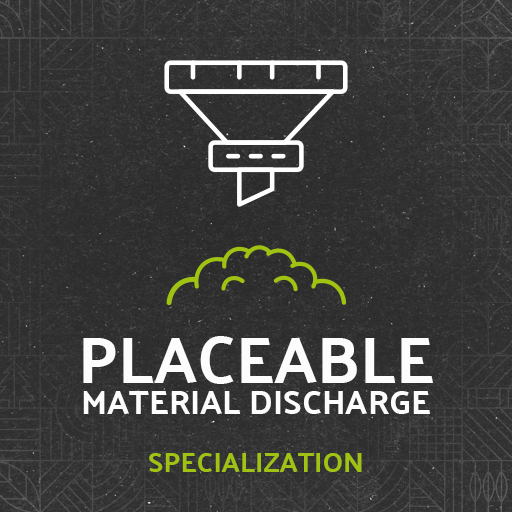
<style>
.page{position:relative;width:512px;height:512px}
.page>*{position:absolute;margin:0}
.t1{font:66px "PalanquinDark-Regular";color:#fcfcfc;text-transform:uppercase}
.t2{font:34px "PalanquinDark-Regular";color:#fcfcfc;text-transform:uppercase}
.t3{font:28px "PalanquinDark-Regular";color:#a0c213;text-transform:uppercase}
</style>
<div class="page">
<p class="t1" style="left:83px;top:336px;width:350px;height:48px">Placeable</p>
<p class="t2" style="left:83px;top:391px;width:347px;height:23px">Material DISCHARGE</p>
<p class="t3" style="left:149px;top:453px;width:213px;height:19px">Specialization</p>
</div>
